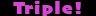
<style>
.page{position:relative;width:96px;height:16px;background:#000000}
.page>*{position:absolute;margin:0}
.t1{font:17.8px "Skia_2.919wght";letter-spacing:0.075em;color:#d647d2;scale:1.03 1}
</style>
<div class="page">
<p class="t1" style="left:13px;top:1px;width:68px;height:17px">Triple!</p>
</div>
